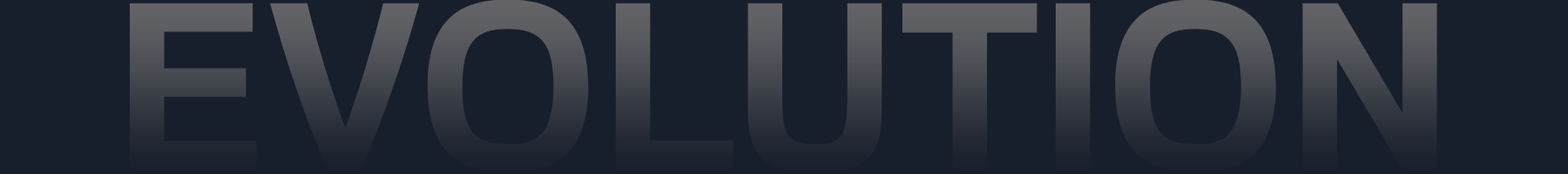
<style>
.page{position:relative;width:1568px;height:174px;background:#181f2c}
.page>*{position:absolute;margin:0}
.t1{font:232.3px "FamiliarPro-Bold"}
</style>
<div class="page">
<p class="t1" style="left:130px;top:0px;width:1307px;height:174px">EVOLUTION</p>
</div>
